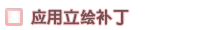
<style>
.page{position:relative;width:200px;height:30px;background:#ffffff}
.page>*{position:absolute;margin:0}
.t1{font:16px "AdobeFanHeitiStd-Bold";color:#7c6a6a;font-weight:bold}
.t2{font:16px "AdobeHeitiStd-Regular";color:#7c6a6a;font-weight:bold}
</style>
<div class="page">
<p class="t1" style="left:31px;top:9px;width:98px;height:17px"><span class="t2">应</span>用立<span class="t2">绘</span>补丁</p>
</div>
